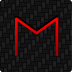
<style>
.page{position:relative;width:72px;height:72px;background:#0c0c0d}
.page>*{position:absolute;margin:0}
.t1{font:48px "Fh_Blue";scale:1.12 1}
</style>
<div class="page">
<p class="t1" style="left:15px;top:17px;width:44px;height:39px">M</p>
</div>
